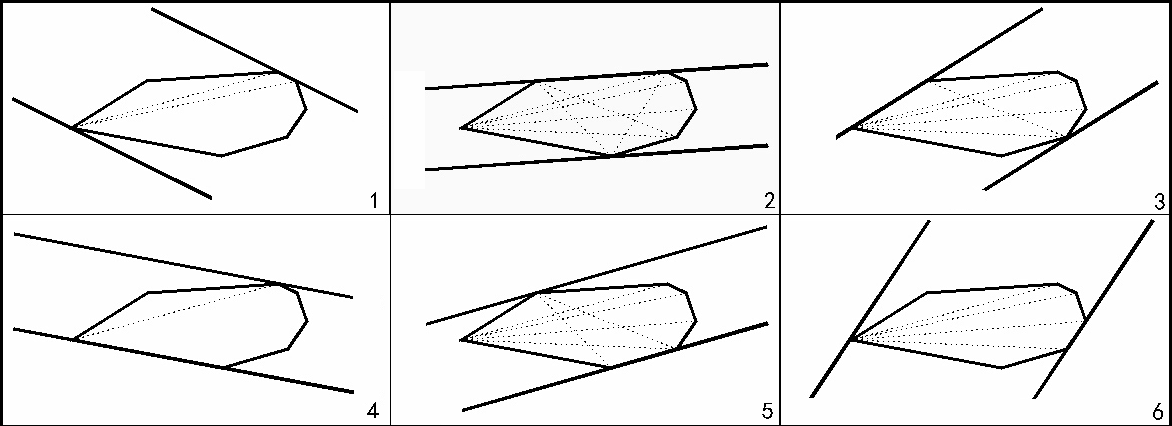
<style>
.page{position:relative;width:1172px;height:426px;background:#fefefe}
.page>*{position:absolute;margin:0}
.t1{font:12px "SimHei";color:#000000}
</style>
<div class="page">
<p class="t1" style="left:371px;top:192px;width:5px;height:16px">1</p>
<p class="t1" style="left:765px;top:192px;width:10px;height:16px">2</p>
<p class="t1" style="left:1155px;top:193px;width:10px;height:17px">3</p>
<p class="t1" style="left:367px;top:402px;width:12px;height:16px">4</p>
<p class="t1" style="left:762px;top:403px;width:11px;height:16px">5</p>
<p class="t1" style="left:1153px;top:403px;width:10px;height:17px">6</p>
</div>
